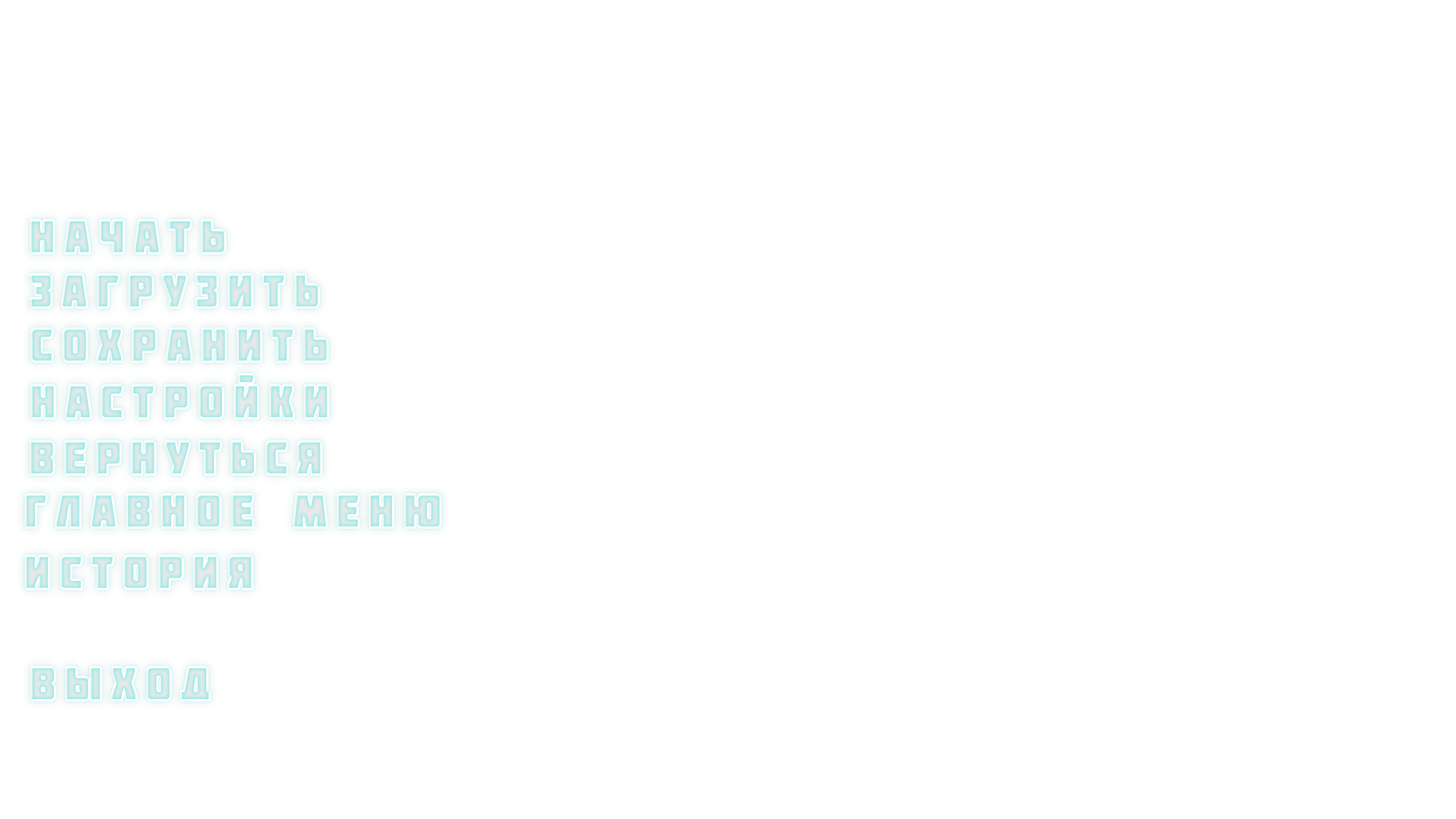
<style>
.page{position:relative;width:1456px;height:819px;background:#ffffff}
.page>*{position:absolute;margin:0}
.t1{font:45.3px "Molot";letter-spacing:0.2em;font-weight:bold;scale:0.94 1}
</style>
<div class="page">
<p class="t1" style="left:30px;top:220px;width:195px;height:33px">НАЧАТЬ</p>
<p class="t1" style="left:30px;top:275px;width:289px;height:33px">ЗАГРУЗИТЬ</p>
<p class="t1" style="left:31px;top:328px;width:297px;height:34px">СОХРАНИТЬ</p>
<p class="t1" style="left:31px;top:374px;width:297px;height:45px">Настройки</p>
<p class="t1" style="left:30px;top:441px;width:292px;height:34px">Вернуться</p>
<p class="t1" style="left:25px;top:494px;width:416px;height:34px">Главное меню</p>
<p class="t1" style="left:25px;top:556px;width:228px;height:33px">История</p>
<p class="t1" style="left:31px;top:667px;width:179px;height:34px">ВЫХОД</p>
</div>
